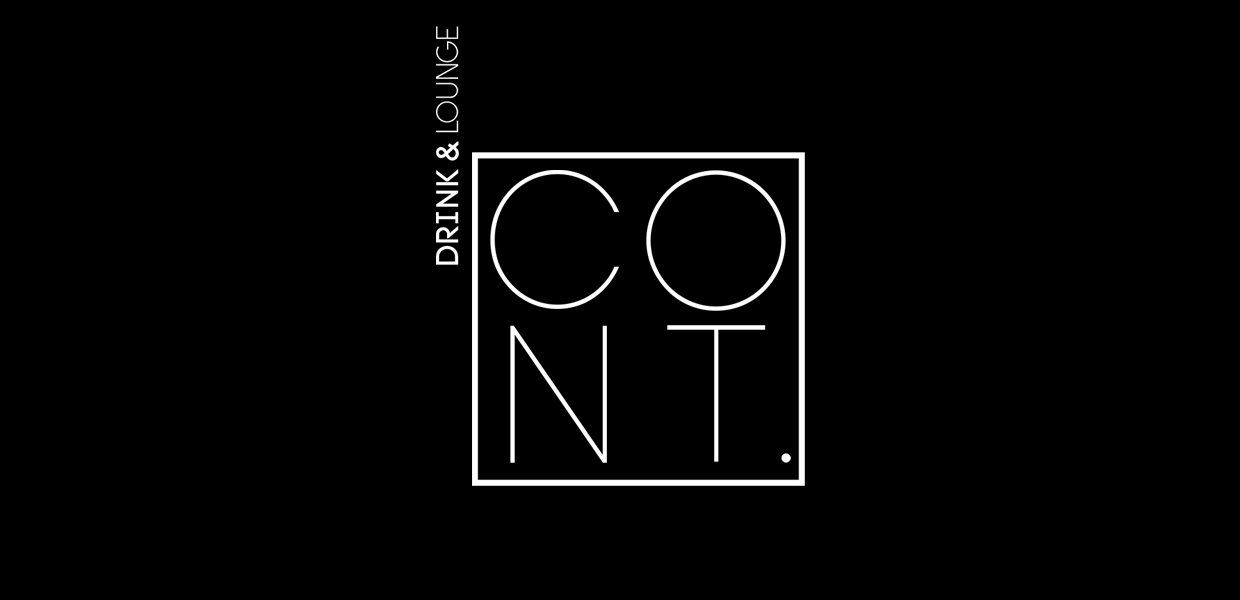
<style>
.page{position:relative;width:1240px;height:600px;background:#000000}
.page>*{position:absolute;margin:0}
.t1{font:31.2px "Code-Pro-LC";color:#ffffff}
.t2{font:31.2px "Alcubierre";color:#ffffff}
.t3{font:195.2px "Code-Pro-Light";color:#ffffff}
</style>
<div class="page">
<p class="t1" style="left:436px;top:26px;width:23px;height:239px;rotate:-90deg">DRINK &amp; <span class="t2">LOUNGE</span></p>
<p class="t3" style="left:490px;top:170px;width:129px;height:139px">C</p>
<p class="t3" style="left:646px;top:170px;width:140px;height:141px">O</p>
<p class="t3" style="left:510px;top:325px;width:97px;height:138px">N</p>
<p class="t3" style="left:667px;top:325px;width:124px;height:138px">T.</p>
</div>
